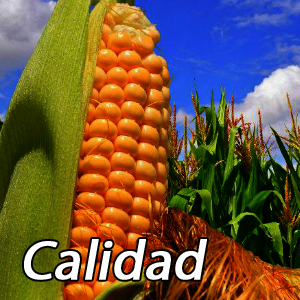
<style>
.page{position:relative;width:300px;height:300px}
.page>*{position:absolute;margin:0}
.t1{font:55.6px "MyriadPro-Regular";color:#ffffff;font-weight:bold;font-style:italic}
</style>
<div class="page">
<p class="t1" style="left:24px;top:239px;width:183px;height:41px">Calidad</p>
</div>
